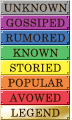
<style>
.page{position:relative;width:72px;height:120px}
.page>*{position:absolute;margin:0}
.t1{font:10.7px "CenturySchoolbook";letter-spacing:0.025em;color:#321a02}
</style>
<div class="page">
<p class="t1" style="left:4px;top:3px;width:63px;height:9px">UNKNOWN</p>
<p class="t1" style="left:6px;top:18px;width:59px;height:9px">GOSSIPED</p>
<p class="t1" style="left:5px;top:33px;width:60px;height:9px">RUMORED</p>
<p class="t1" style="left:13px;top:48px;width:45px;height:9px">KNOWN</p>
<p class="t1" style="left:10px;top:63px;width:51px;height:9px">STORIED</p>
<p class="t1" style="left:8px;top:78px;width:55px;height:9px">POPULAR</p>
<p class="t1" style="left:9px;top:93px;width:52px;height:9px">AVOWED</p>
<p class="t1" style="left:11px;top:108px;width:49px;height:9px">LEGEND</p>
</div>
